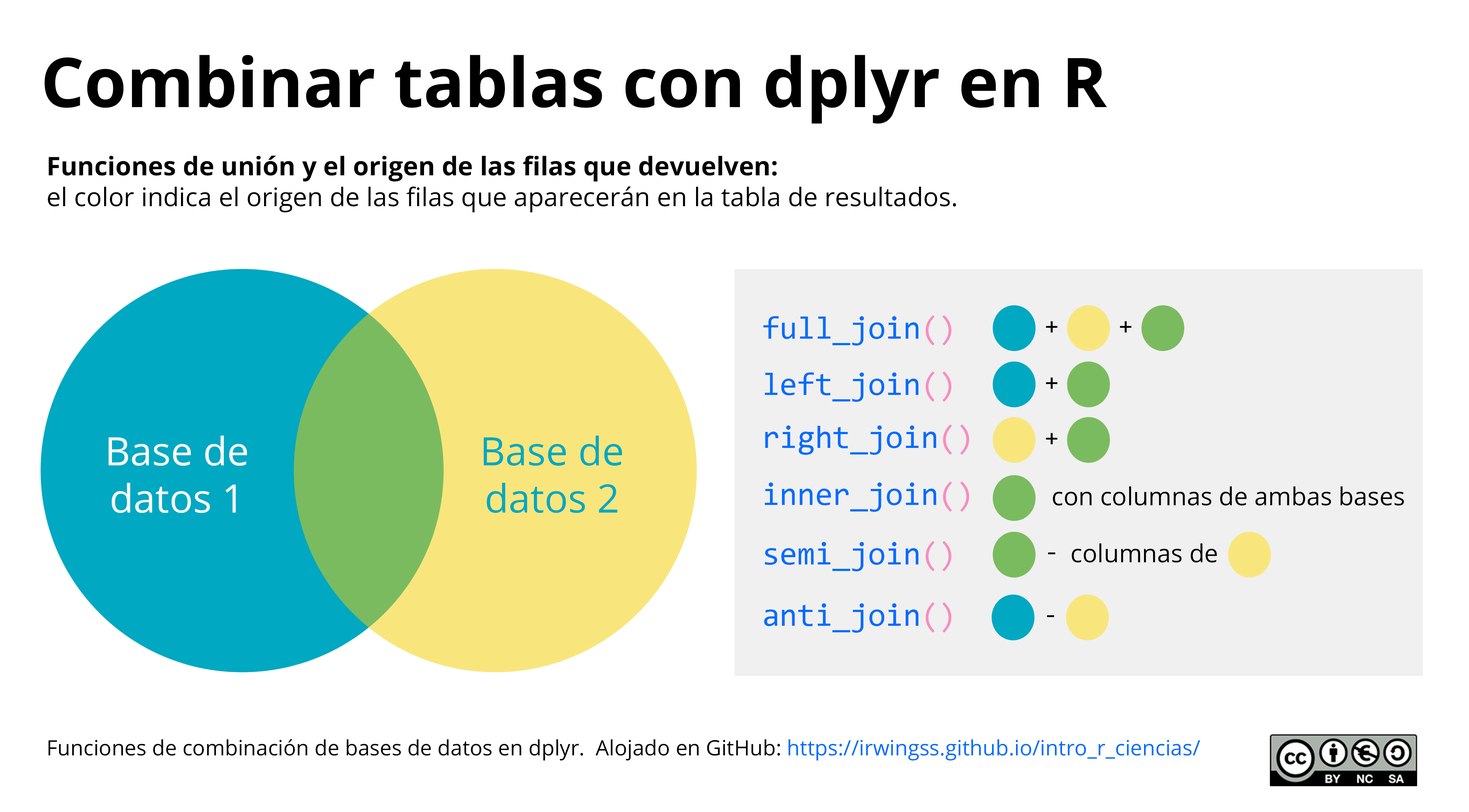
<style>
.page{position:relative;width:1469px;height:812px;background:#ffffff}
.page>*{position:absolute;margin:0}
.t1{font:68.5px "OpenSans-Bold";color:#000000}
.t2{font:25.7px "OpenSans-Regular";color:#000000}
.t3{font:25.7px "OpenSans-Bold";color:#000000}
.t4{font:32.1px "Consolas";color:#006bff}
.t5{font:32.1px "Consolas";color:#f88dbd}
.t6{font:24.4px "Consolas";color:#000000}
.t7{font:39.3px "OpenSans-Regular";color:#ffffff}
.t8{font:39.3px "OpenSans-Regular";color:#00a8c1}
.t9{font:24.8px "OpenSans-Regular";color:#000000}
.t10{font:21.2px "OpenSans-Regular";color:#000000}
.t11{font:21.2px "OpenSans-Regular";color:#006cff}
</style>
<div class="page">
<p class="t1" style="left:44px;top:55px;width:1063px;height:69px">Combinar tablas con dplyr en R</p>
<p class="t2" style="left:48px;top:155px;width:908px;height:57px"><span class="t3">Funciones de unión y el origen de las filas que devuelven:</span> <br>el color indica el origen de las filas que aparecerán en la tabla de resultados.</p>
<p class="t4" style="left:763px;top:315px;width:189px;height:30px">full_join<span class="t5">()</span></p>
<p class="t6" style="left:1046px;top:321px;width:12px;height:11px">+</p>
<p class="t6" style="left:1120px;top:321px;width:12px;height:11px">+</p>
<p class="t4" style="left:765px;top:371px;width:187px;height:31px">left_join<span class="t5">()</span></p>
<p class="t6" style="left:1046px;top:377px;width:12px;height:12px">+</p>
<p class="t4" style="left:765px;top:424px;width:204px;height:31px">right_join<span class="t5">()</span></p>
<p class="t7" style="left:108px;top:435px;width:139px;height:78px;text-align:center">Base de datos 1</p>
<p class="t8" style="left:484px;top:435px;width:138px;height:78px;text-align:center">Base de datos 2</p>
<p class="t6" style="left:1046px;top:433px;width:12px;height:11px">+</p>
<p class="t4" style="left:765px;top:481px;width:204px;height:31px">inner_join<span class="t5">()</span></p>
<p class="t9" style="left:1053px;top:486px;width:351px;height:19px">con columnas de ambas bases</p>
<p class="t4" style="left:765px;top:541px;width:187px;height:30px">semi_join<span class="t5">()</span></p>
<p class="t9" style="left:1072px;top:543px;width:145px;height:19px">columnas de</p>
<p class="t6" style="left:1048px;top:552px;width:8px;height:2px">-</p>
<p class="t4" style="left:764px;top:602px;width:188px;height:30px">anti_join<span class="t5">()</span></p>
<p class="t6" style="left:1047px;top:615px;width:8px;height:2px">-</p>
<p class="t10" style="left:48px;top:739px;width:1152px;height:21px">Funciones de combinación de bases de datos en dplyr.  Alojado en GitHub: <span class="t11">https://irwingss.github.io/intro_r_ciencias/</span></p>
</div>
